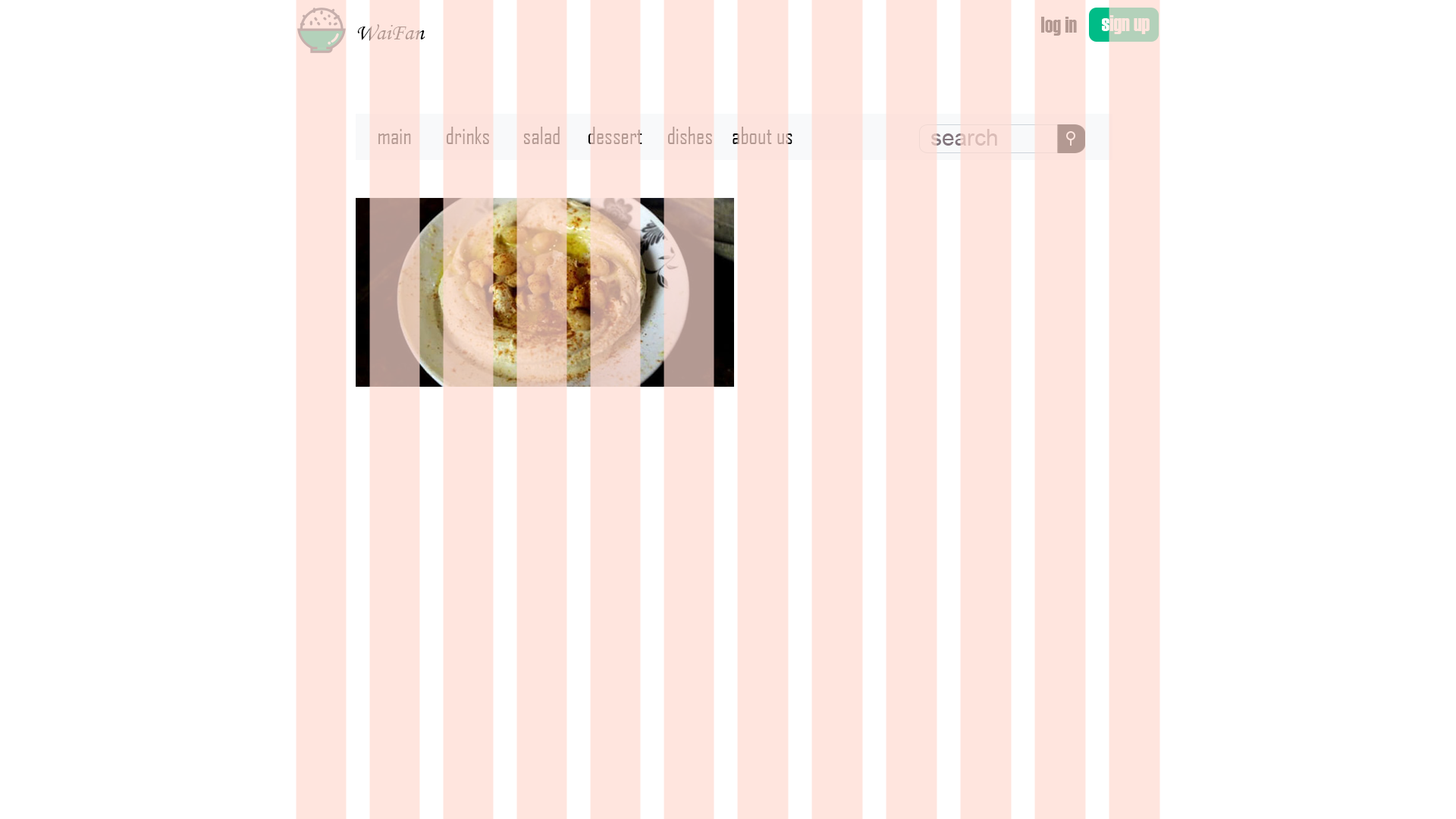
<style>
.page{position:relative;width:1456px;height:819px;background:#ffffff}
.page>*{position:absolute;margin:0}
.t1{font:22.7px "Haettenschweiler";color:#b39992}
.t2{font:22.7px "Haettenschweiler";color:#ffe5de}
.t3{font:22.7px "MonotypeCorsiva";color:#b39992}
.t4{font:22.7px "AgencyFB-Reg";color:#b39992}
</style>
<div class="page">
<p class="t1" style="left:1041px;top:17px;width:36px;height:19px">log in</p>
<p class="t2" style="left:1102px;top:15px;width:48px;height:19px">sign up</p>
<p class="t3" style="left:357px;top:24px;width:68px;height:17px">WaiFan</p>
<p class="t4" style="left:378px;top:129px;width:33px;height:15px">main</p>
<p class="t4" style="left:446px;top:127px;width:43px;height:17px">drinks</p>
<p class="t4" style="left:523px;top:127px;width:37px;height:17px">salad</p>
<p class="t4" style="left:588px;top:127px;width:54px;height:17px">dessert</p>
<p class="t4" style="left:667px;top:127px;width:45px;height:17px">dishes</p>
<p class="t4" style="left:733px;top:127px;width:59px;height:17px">about us</p>
</div>
